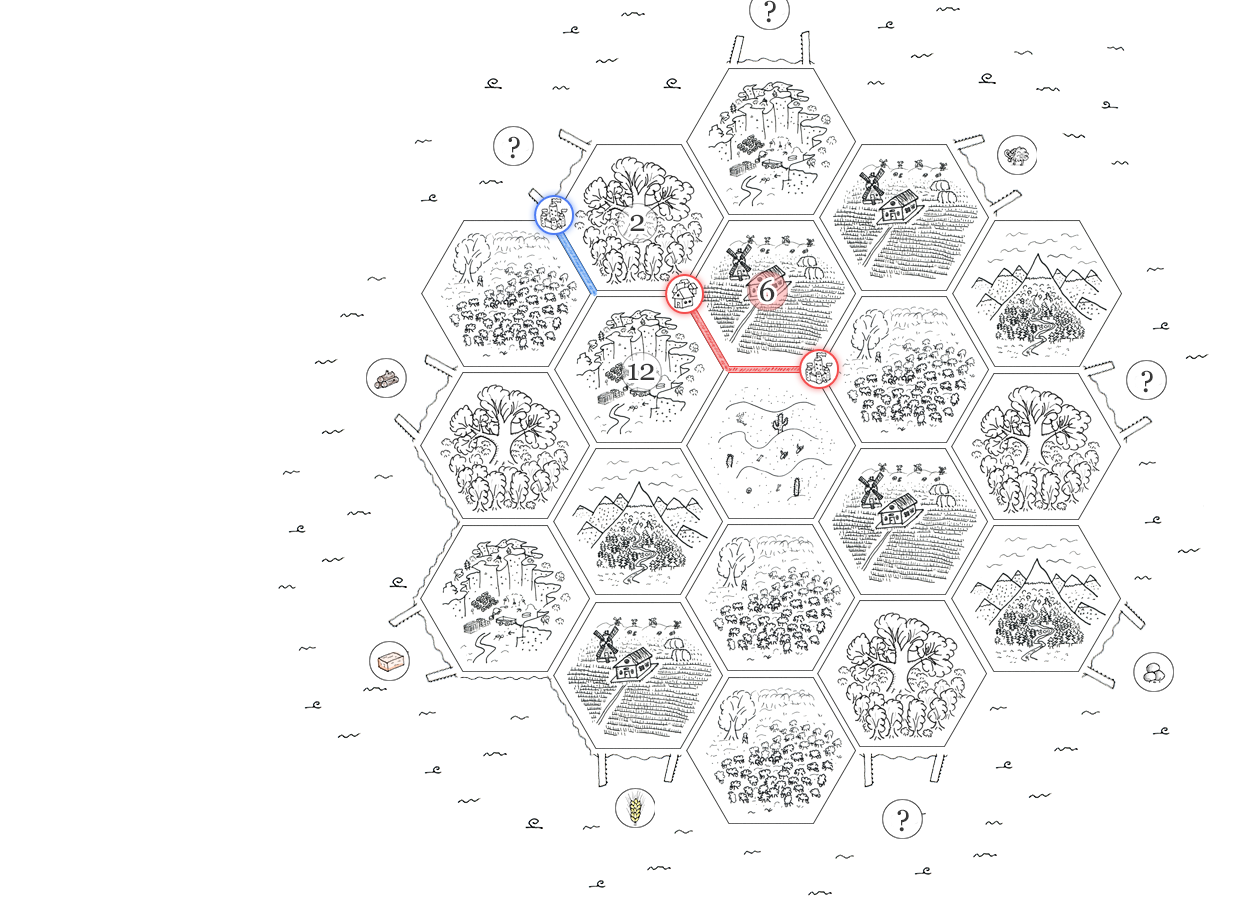
<style>
.page{position:relative;width:1234px;height:901px;background:#ffffff}
.page>*{position:absolute;margin:0}
.t1{font:30px "Georgia";letter-spacing:-0.02em;color:#383838}
</style>
<div class="page">
<p class="t1" style="left:764px;top:0px;width:12px;height:23px">?</p>
<p class="t1" style="left:508px;top:136px;width:12px;height:23px">?</p>
<p class="t1" style="left:630px;top:214px;width:15px;height:17px">2</p>
<p class="t1" style="left:760px;top:279px;width:15px;height:23px">6</p>
<p class="t1" style="left:628px;top:363px;width:27px;height:17px">12</p>
<p class="t1" style="left:1141px;top:370px;width:12px;height:23px">?</p>
<p class="t1" style="left:897px;top:809px;width:12px;height:23px">?</p>
</div>
